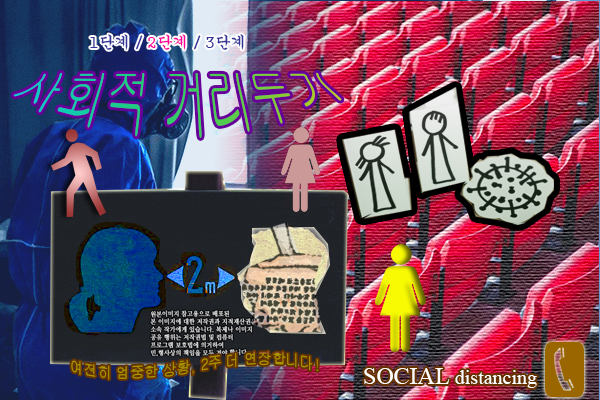
<style>
.page{position:relative;width:600px;height:400px}
.page>*{position:absolute;margin:0}
.t1{font:16px "Gungsuh";color:#333399}
.t2{font:16px "Gungsuh";color:#ff0099}
.t3{font:40px "Gulim"}
.t4{font:16px/4.7px "Gulim";color:#a99700;scale:0.87 1}
.t5{font:20px "TimesNewRomanPSMT";color:#ffffff}
.t6{font:24px "TimesNewRomanPSMT";color:#ffffff}
</style>
<div class="page">
<p class="t1" style="left:90px;top:34px;width:154px;height:16px">1단계 / <span class="t2">2단계 </span>/ 3단계</p>
<p class="t3" style="left:13px;top:72px;width:329px;height:66px">사회적 거리두기</p>
<p class="t4" style="left:71px;top:351px;width:247px;height:29px;text-align:center">여전히 엄중한 상황, 2주 더 연장합니다!</p>
<p class="t5" style="left:364px;top:368px;width:173px;height:20px"><span class="t6">SOCIAL </span>distancing</p>
</div>
